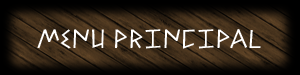
<style>
.page{position:relative;width:300px;height:75px}
.page>*{position:absolute;margin:0}
.t1{font:28px "Alfabetix";color:#ffffff}
</style>
<div class="page">
<p class="t1" style="left:37px;top:29px;width:224px;height:20px">MeNu prINCIPAL</p>
</div>
